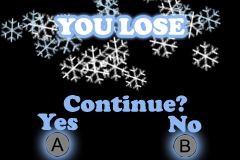
<style>
.page{position:relative;width:240px;height:160px;background:#000000}
.page>*{position:absolute;margin:0}
.t1{font:24px "CooperBlack";color:#ffffff}
.t2{font:24px "CooperBlack";color:#8cb7f1}
</style>
<div class="page">
<p class="t1" style="left:57px;top:18px;width:128px;height:17px">YOU LOSE</p>
<p class="t2" style="left:63px;top:95px;width:125px;height:17px">Continue?</p>
<p class="t2" style="left:37px;top:113px;width:41px;height:18px">Yes</p>
<p class="t2" style="left:168px;top:115px;width:34px;height:18px">No</p>
</div>
